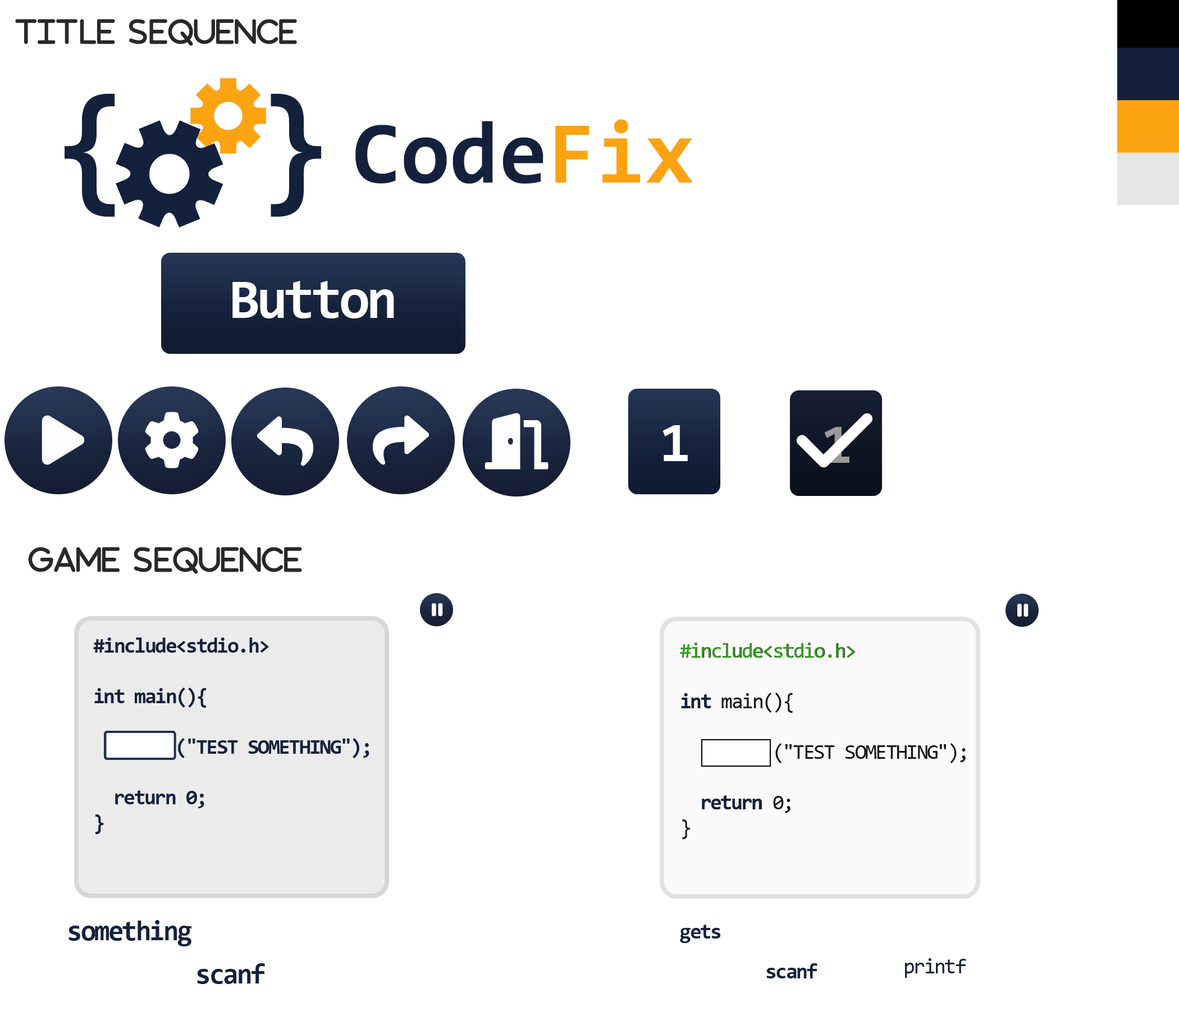
<style>
.page{position:relative;width:1179px;height:1011px;background:#ffffff}
.page>*{position:absolute;margin:0}
.t1{font:135.7px "Consolas-Bold";letter-spacing:0.94em;color:#14213d}
.t2{font:135.7px "Consolas-Bold";letter-spacing:0.56em;color:#14213d}
.t3{font:88.9px "Consolas-Bold";color:#14213d}
.t4{font:88.9px "Consolas-Bold";color:#fca311}
.t5{font:56.2px "Consolas-Bold";letter-spacing:-0.06em;color:#ffffff}
.t6{font:56.2px "Consolas-Bold";letter-spacing:-0.06em}
.t7{font:21.1px "Consolas-Bold";letter-spacing:-0.06em;color:#14213d}
.t8{font:21.1px "Consolas";letter-spacing:-0.06em}
.t9{font:21.1px "Consolas";letter-spacing:-0.06em;color:#349c23}
.t10{font:28.1px "Consolas-Bold";letter-spacing:-0.06em;color:#14213d}
.t11{font:21.1px "Consolas";letter-spacing:-0.06em;color:#14213d}
</style>
<div class="page">
<p class="t1" style="left:65px;top:94px;width:256px;height:123px">{<span class="t2">}</span></p>
<p class="t3" style="left:356px;top:119px;width:337px;height:65px">Code<span class="t4">Fix</span></p>
<p class="t5" style="left:233px;top:281px;width:161px;height:37px">Button</p>
<p class="t5" style="left:663px;top:425px;width:25px;height:36px">1</p>
<p class="t6" style="left:825px;top:427px;width:25px;height:36px">1</p>
<p class="t7" style="left:93px;top:637px;width:277px;height:197px">#include&lt;stdio.h&gt;<br><br>int main(){<br> <br> printf("TEST SOMETHING");<br> <br> return 0;<br>}</p>
<p class="t8" style="left:680px;top:643px;width:286px;height:196px">#include&lt;stdio.h&gt;<br><br>int main(){<br> <br>        ("TEST SOMETHING");<br> <br> return 0;<br>}</p>
<p class="t9" style="left:680px;top:643px;width:175px;height:15px">#include&lt;stdio.h&gt;</p>
<p class="t7" style="left:681px;top:693px;width:31px;height:15px">int</p>
<p class="t7" style="left:702px;top:795px;width:60px;height:14px">return</p>
<p class="t10" style="left:69px;top:920px;width:123px;height:26px">something</p>
<p class="t7" style="left:680px;top:924px;width:41px;height:19px">gets</p>
<p class="t10" style="left:197px;top:963px;width:68px;height:21px">scanf</p>
<p class="t7" style="left:767px;top:963px;width:51px;height:15px">scanf</p>
<p class="t11" style="left:905px;top:958px;width:62px;height:20px">printf</p>
</div>
